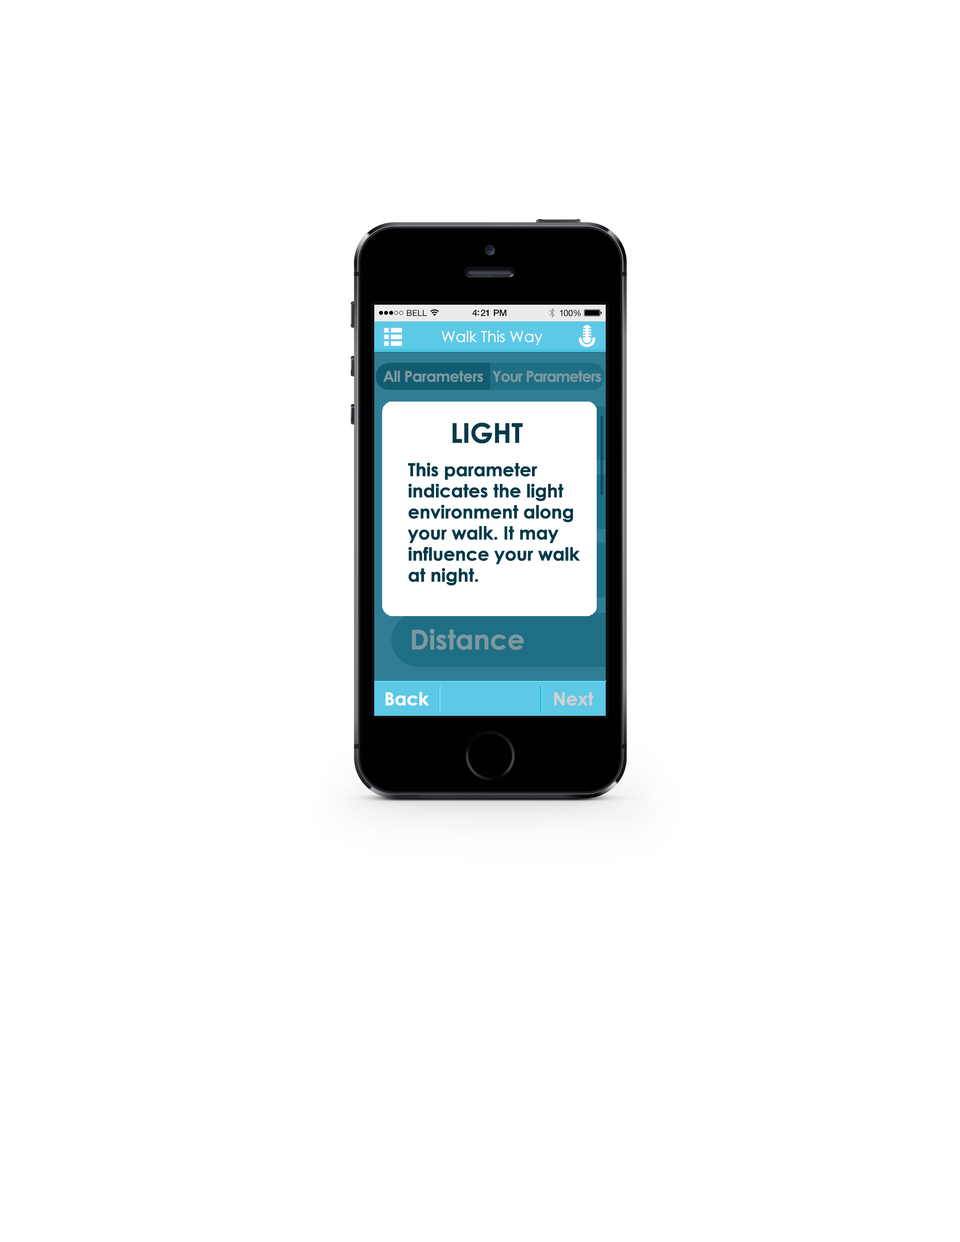
<style>
.page{position:relative;width:960px;height:1242px;background:#ffffff}
.page>*{position:absolute;margin:0}
.t1{font:15.1px "CenturyGothic";letter-spacing:-0.025em;color:#ffffff;font-weight:bold}
.t2{font:15.1px "CenturyGothic-Bold";letter-spacing:-0.05em;color:#7d98a0;font-weight:bold}
.t3{font:15.1px "CenturyGothic-Bold";letter-spacing:-0.075em;color:#7d98a0;font-weight:bold}
.t4{font:27.1px "CenturyGothic-Bold";letter-spacing:-0.025em;color:#053a48;font-weight:bold}
.t5{font:18.1px/21.1px "CenturyGothic-Bold";letter-spacing:-0.025em;color:#053a48;font-weight:bold}
.t6{font:27.1px "CenturyGothic-Bold";letter-spacing:-0.025em;color:#7d98a0;font-weight:bold}
.t7{font:18.1px "CenturyGothic-Bold";letter-spacing:-0.025em;color:#ffffff;font-weight:bold}
.t8{font:18.1px "CenturyGothic-Bold";letter-spacing:-0.025em;color:#d1d1d1;font-weight:bold}
</style>
<div class="page">
<p class="t1" style="left:442px;top:331px;width:100px;height:14px">Walk This Way</p>
<p class="t2" style="left:383px;top:370px;width:100px;height:12px">All Parameters</p>
<p class="t3" style="left:492px;top:371px;width:109px;height:11px">Your Parameters</p>
<p class="t4" style="left:452px;top:423px;width:71px;height:20px">LIGHT</p>
<p class="t5" style="left:408px;top:463px;width:172px;height:123px">This parameter indicates the light environment along your walk. It may influence your walk at night.</p>
<p class="t6" style="left:412px;top:629px;width:112px;height:21px">Distance</p>
<p class="t7" style="left:385px;top:692px;width:44px;height:14px">Back</p>
<p class="t8" style="left:554px;top:692px;width:39px;height:14px">Next</p>
</div>
